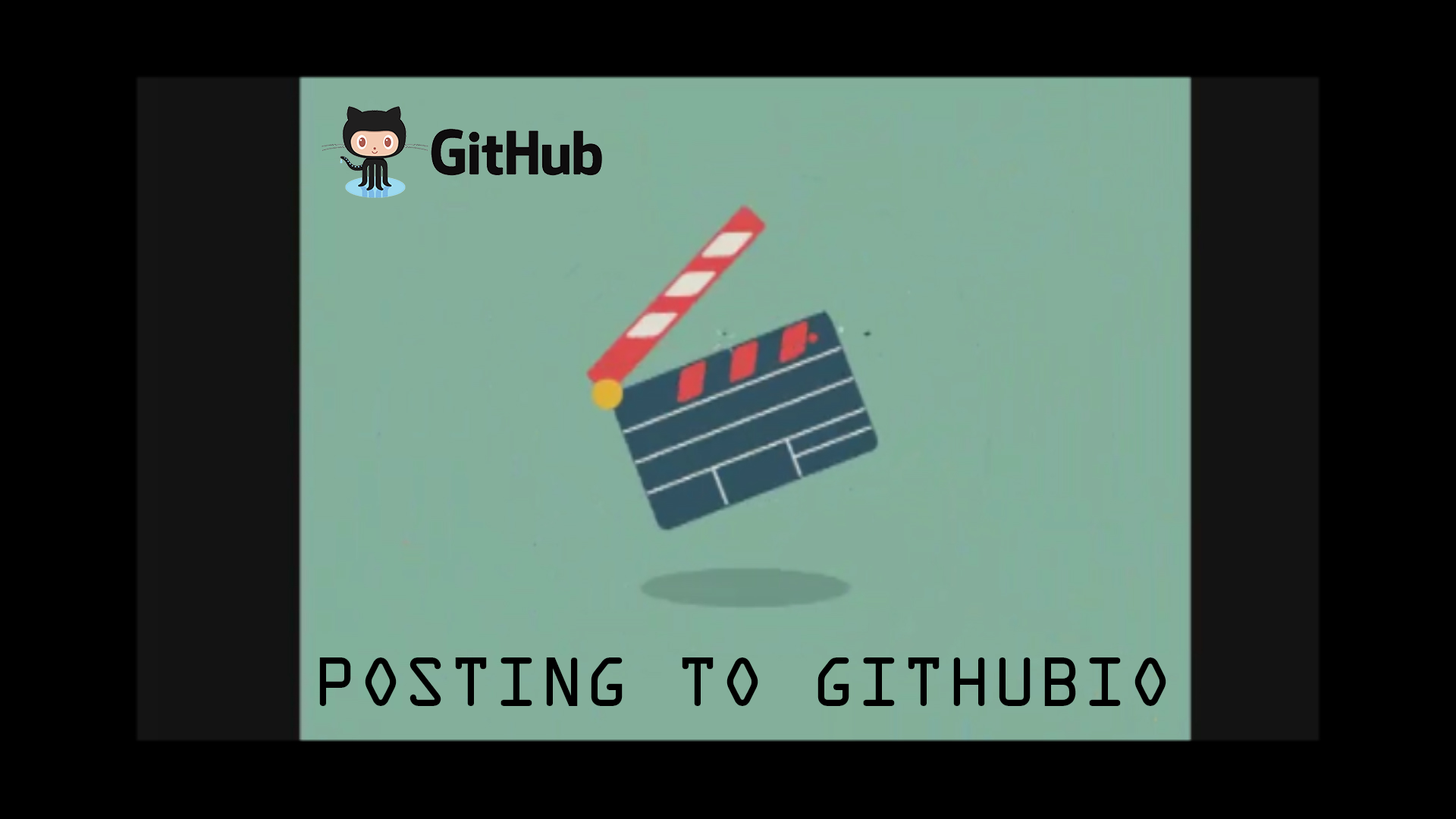
<style>
.page{position:relative;width:1456px;height:819px;background:#000000}
.page>*{position:absolute;margin:0}
.t1{font:62.7px "OCRAStd";color:#000000}
</style>
<div class="page">
<p class="t1" style="left:319px;top:657px;width:847px;height:49px">POSTING TO GITHUBIO</p>
</div>
